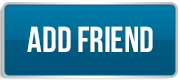
<style>
.page{position:relative;width:180px;height:80px}
.page>*{position:absolute;margin:0}
.t1{font:36px "UTM-Bebas";color:#ffffff}
</style>
<div class="page">
<p class="t1" style="left:27px;top:26px;width:126px;height:26px">add friend</p>
</div>
